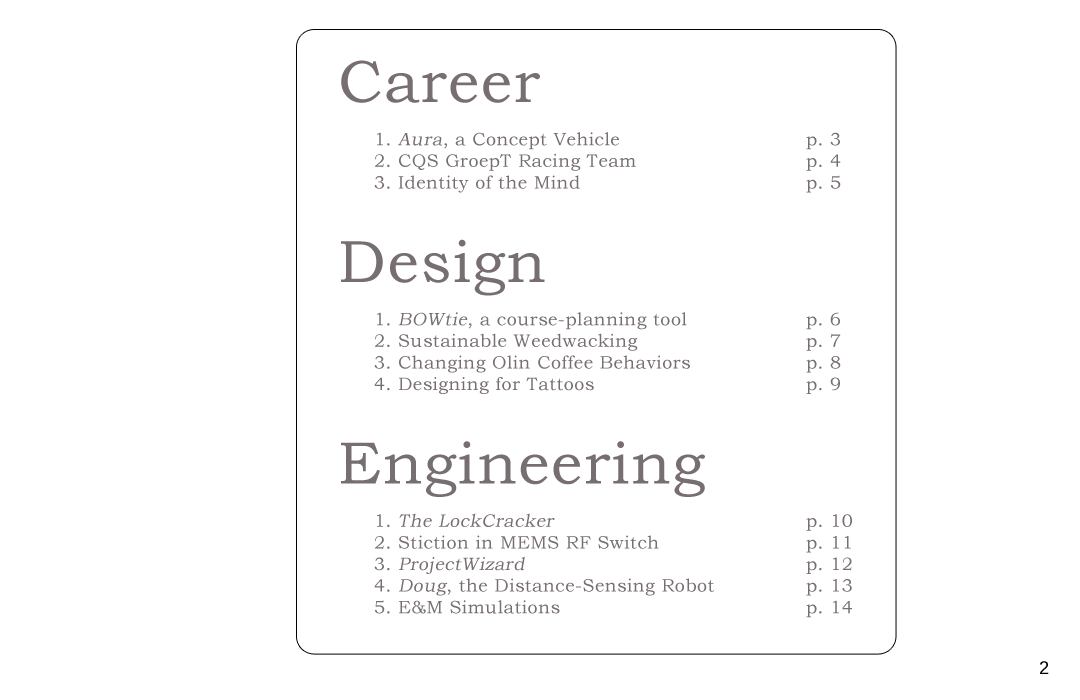
<style>
.page{position:relative;width:1080px;height:700px;background:#ffffff}
.page>*{position:absolute;margin:0}
.t1{font:18px "BookmanOldStyle";letter-spacing:0.025em;color:#776f6f}
.t2{font:60px "BookmanOldStyle";letter-spacing:0.025em;color:#776f6f}
.t3{font:18px "BookmanOldStyle";letter-spacing:0.025em;color:#776f6f;font-style:italic}
.t4{font:18px "LiberationSans";letter-spacing:0.025em;color:#000000}
</style>
<div class="page">
<p class="t1" style="left:341px;top:60px;width:511px;height:558px;text-align:justify"><span class="t2">Career<br><br> </span>1. <span class="t3">Aura</span>, a Concept Vehicle      p. 3<br> 2. CQS GroepT Racing Team     p. 4<br> 3. Identity of the Mind       p. 5<br><br><span class="t2">Design<br><br> </span>1. <span class="t3">BOWtie</span>, a course-planning tool    p. 6<br> 2. Sustainable Weedwacking     p. 7<br> 3. Changing Olin Coffee Behaviors    p. 8<br> 4. Designing for Tattoos      p. 9<br><br><span class="t2">Engineering<br><br> </span>1. <span class="t3">The LockCracker        </span>p. 10<br> 2. Stiction in MEMS RF Switch     p. 11<br> 3. <span class="t3">ProjectWizard        </span>p. 12<br> 4. <span class="t3">Doug</span>, the Distance-Sensing Robot   p. 13<br> 5. E&amp;M Simulations       p. 14</p>
<p class="t4" style="left:1040px;top:661px;width:9px;height:13px">2</p>
</div>
